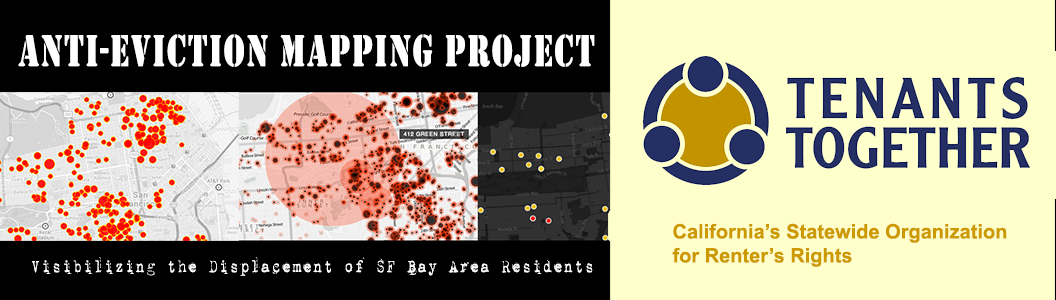
<style>
.page{position:relative;width:1056px;height:300px;background:#ffffcc}
.page>*{position:absolute;margin:0}
.t1{font:46.4px "Stencil";letter-spacing:0.05em;color:#ffffff;scale:0.71 1}
.t2{font:20px "Arial-BoldMT";color:#cc9900}
.t3{font:19.6px "1942report";color:#ffffff;scale:0.82 1}
</style>
<div class="page">
<p class="t1" style="left:18px;top:34px;width:577px;height:33px">anti-eviction mapping project</p>
<p class="t2" style="left:672px;top:223px;width:335px;height:44px">California’s Statewide Organization<br>for Renter’s Rights</p>
<p class="t3" style="left:32px;top:257px;width:561px;height:19px">Visibilizing the Displacement of SF Bay Area Residents</p>
</div>
